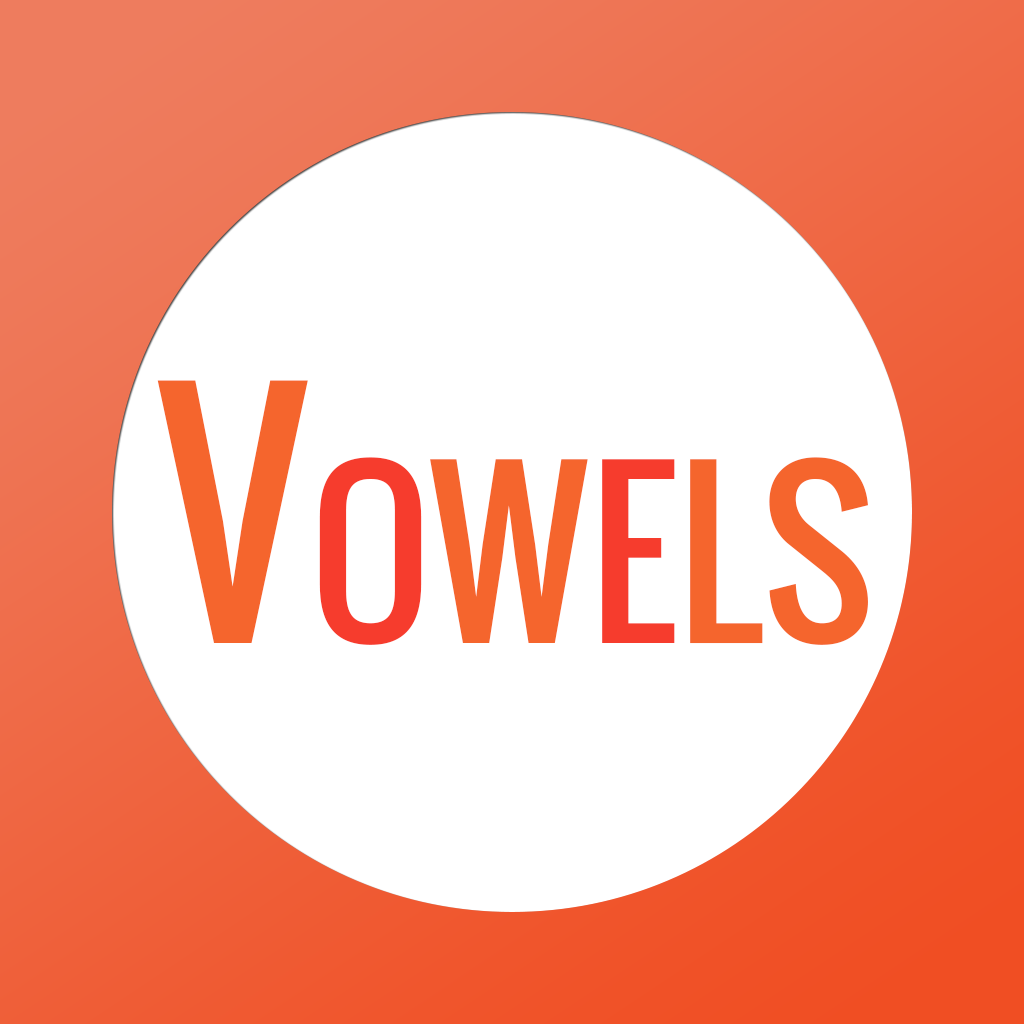
<style>
.page{position:relative;width:1024px;height:1024px;background:#ffffff}
.page>*{position:absolute;margin:0}
.t1{font:300px "Oswald";color:#f5652d;font-variant:small-caps}
.t2{font:300px "Oswald";color:#f63c2d;font-variant:small-caps}
</style>
<div class="page">
<p class="t1" style="left:157px;top:380px;width:711px;height:265px">V<span class="t2">o</span>w<span class="t2">e</span>ls</p>
</div>
